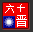
<style>
.page{position:relative;width:33px;height:32px;background:#f20000}
.page>*{position:absolute;margin:0}
.t1{font:10.4px "SimSun";color:#ffffff}
.t2{font:11.7px "SimSun";color:#ffffff}
</style>
<div class="page">
<p class="t1" style="left:5px;top:4px;width:20px;height:9px">六十</p>
<p class="t2" style="left:16px;top:15px;width:11px;height:12px">晋</p>
</div>
